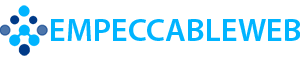
<style>
.page{position:relative;width:300px;height:60px;background:#ffffff}
.page>*{position:absolute;margin:0}
.t1{font:32.5px "MyriadPro-Semibold";color:#00b4ff}
</style>
<div class="page">
<p class="t1" style="left:51px;top:19px;width:250px;height:22px">EMPECCABLEWEB</p>
</div>
